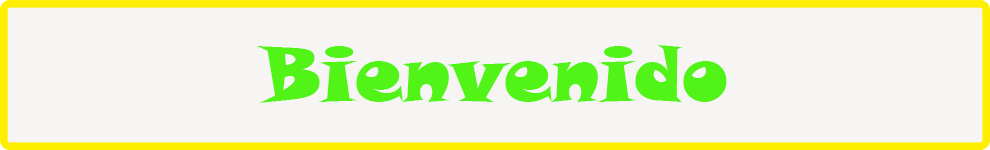
<style>
.page{position:relative;width:990px;height:150px;background:#f7f4f4}
.page>*{position:absolute;margin:0}
.t1{font:76.2px "SnapITC-Regular";color:#52f417}
.t2{font:76.2px "MyriadPro-Regular";color:#040404}
</style>
<div class="page">
<p class="t1" style="left:256px;top:45px;width:471px;height:58px"><span class="t2"><br></span>Bienvenido</p>
</div>
